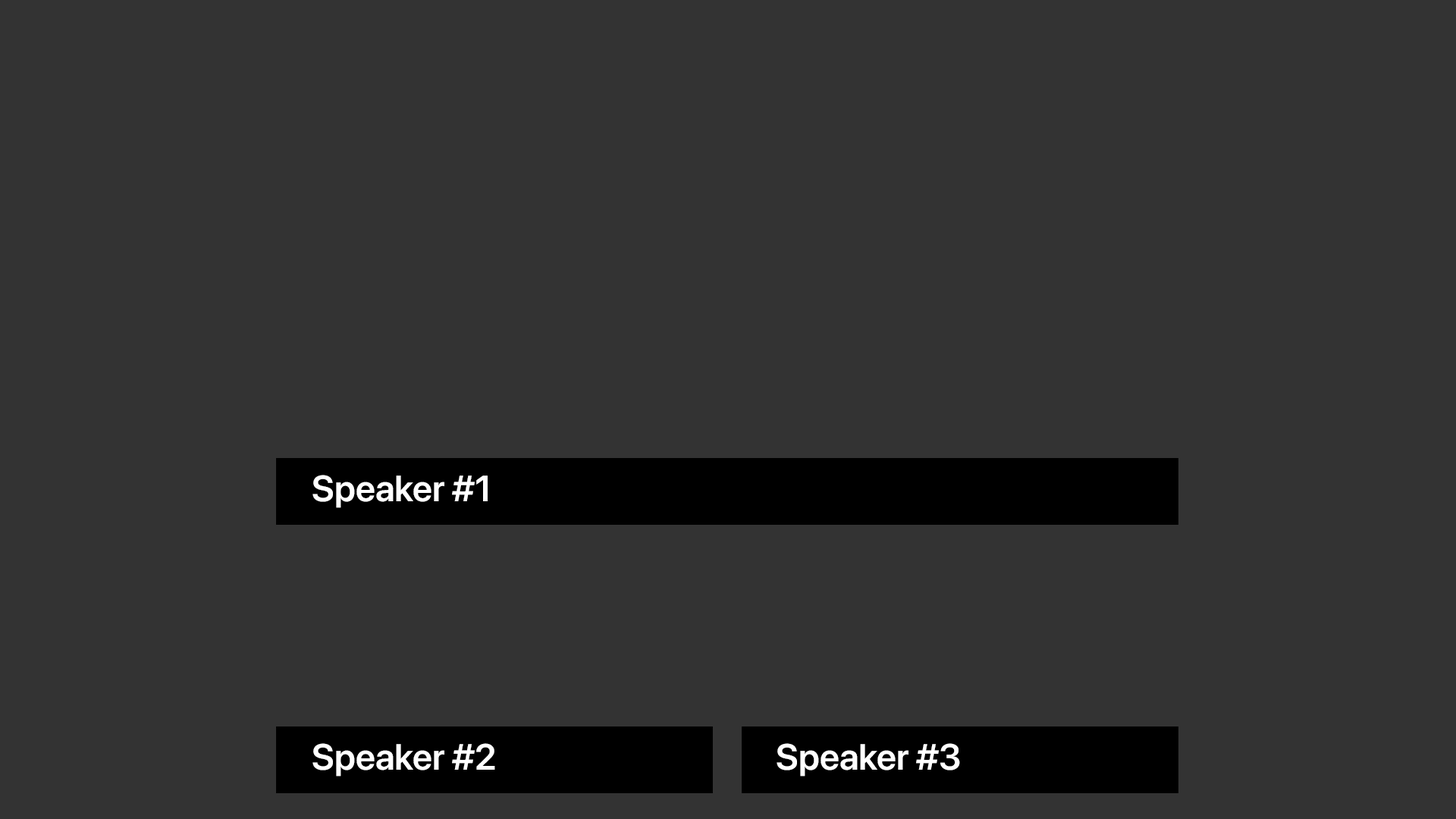
<style>
.page{position:relative;width:1456px;height:819px;background:#333333}
.page>*{position:absolute;margin:0}
.t1{font:36.4px "SFProDisplay-Semibold";color:#ffffff}
</style>
<div class="page">
<p class="t1" style="left:312px;top:475px;width:176px;height:33px">Speaker #1</p>
<p class="t1" style="left:312px;top:743px;width:183px;height:34px">Speaker #2</p>
<p class="t1" style="left:777px;top:743px;width:183px;height:34px">Speaker #3</p>
</div>
